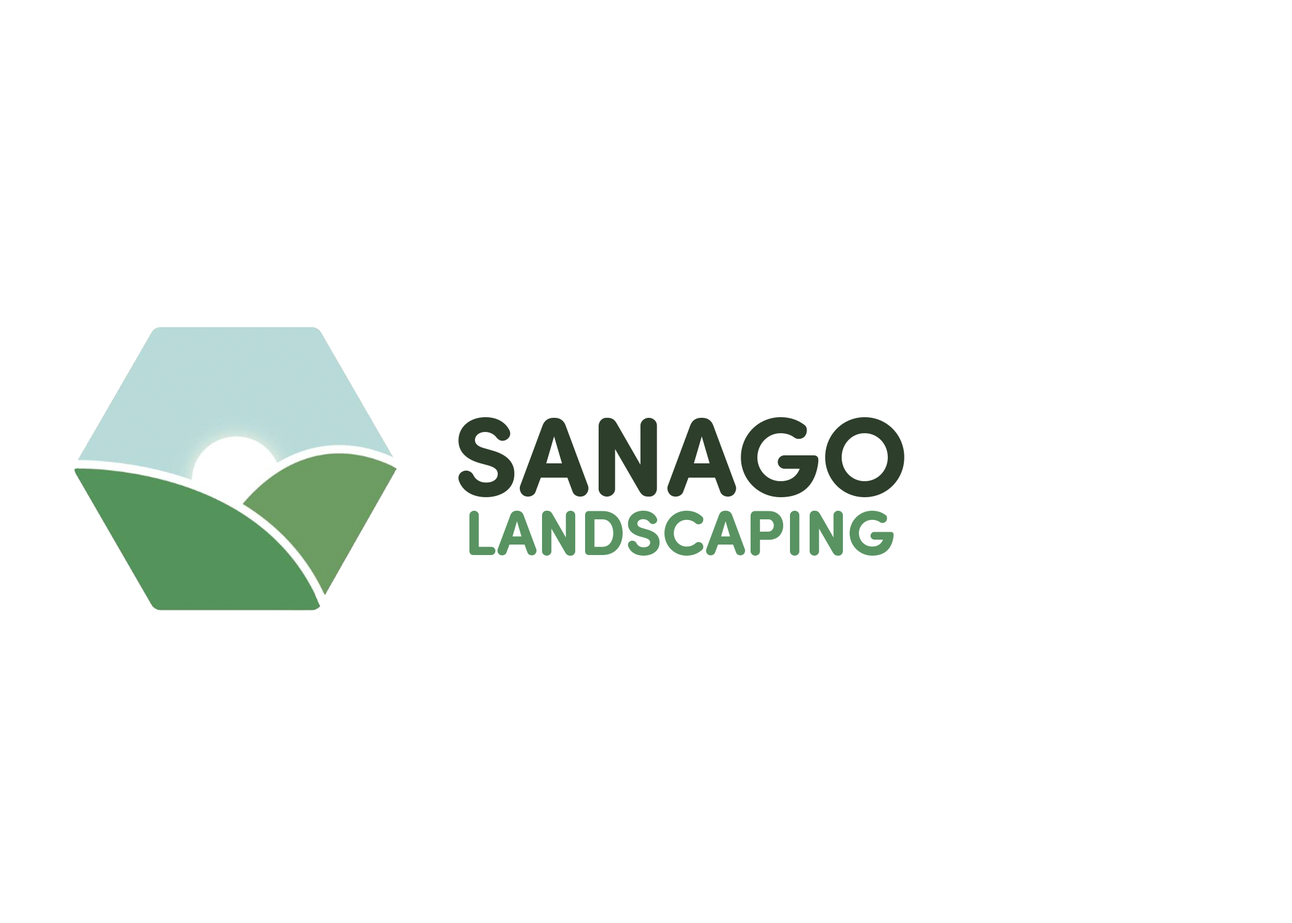
<style>
.page{position:relative;width:1292px;height:923px;background:#ffffff}
.page>*{position:absolute;margin:0}
.t1{font:112.7px "SofiaProSoftBold";color:#2d3e2b}
.t2{font:64px "SofiaProSoftBold";color:#599361}
</style>
<div class="page">
<p class="t1" style="left:458px;top:417px;width:446px;height:80px">SANAGO</p>
<p class="t2" style="left:469px;top:510px;width:425px;height:46px">LANDSCAPING</p>
</div>
